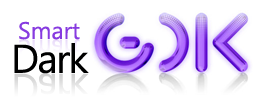
<style>
.page{position:relative;width:264px;height:112px;background:#ffffff}
.page>*{position:absolute;margin:0}
.t1{font:24px "SegoeUI";color:#873be0}
.t2{font:40px "SegoeUI";letter-spacing:-0.04em;color:#000000}
.t3{font:40px "SegoeUI";letter-spacing:-0.04em}
</style>
<div class="page">
<p class="t1" style="left:19px;top:21px;width:61px;height:19px">Smart</p>
<p class="t2" style="left:14px;top:43px;width:75px;height:31px">Dark</p>
<p class="t3" style="left:14px;top:73px;width:75px;height:31px">Dark</p>
</div>
